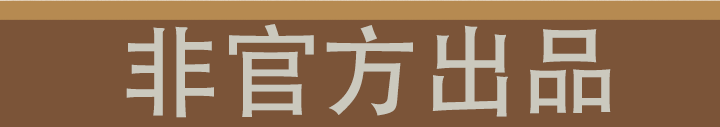
<style>
.page{position:relative;width:720px;height:127px;background:#7b5438}
.page>*{position:absolute;margin:0}
.t1{font:100px "AdobeHeitiStd-Regular";color:#cbc9be}
</style>
<div class="page">
<p class="t1" style="left:126px;top:24px;width:485px;height:94px">非官方出品</p>
</div>
